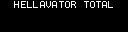
<style>
.page{position:relative;width:128px;height:32px;background:#000000}
.page>*{position:absolute;margin:0}
.t1{font:10px "Terminal";letter-spacing:-0.1em;color:#ffffff}
</style>
<div class="page">
<p class="t1" style="left:14px;top:1px;width:62px;height:7px">HELLAVATOR</p>
</div>
